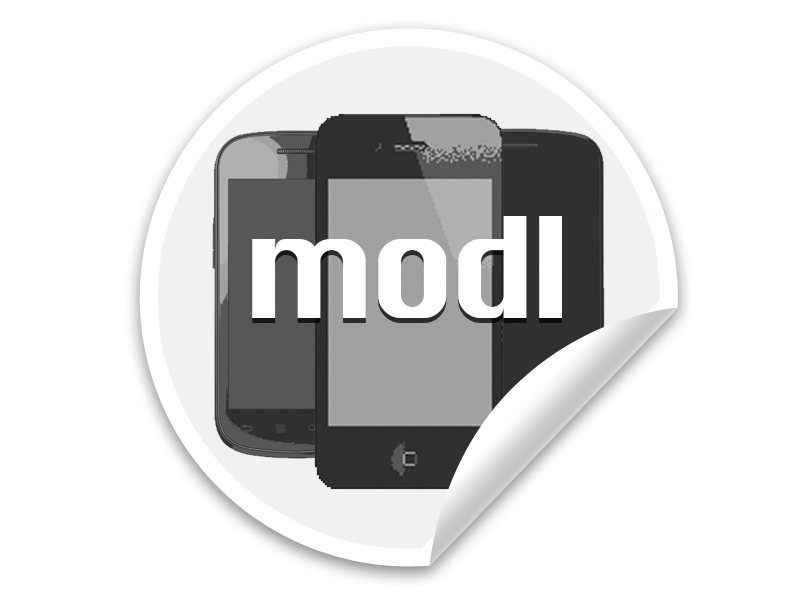
<style>
.page{position:relative;width:800px;height:600px;background:#ffffff}
.page>*{position:absolute;margin:0}
.t1{font:136px "Silom";letter-spacing:-0.075em;color:#ffffff}
</style>
<div class="page">
<p class="t1" style="left:252px;top:216px;width:310px;height:102px">modl</p>
</div>
